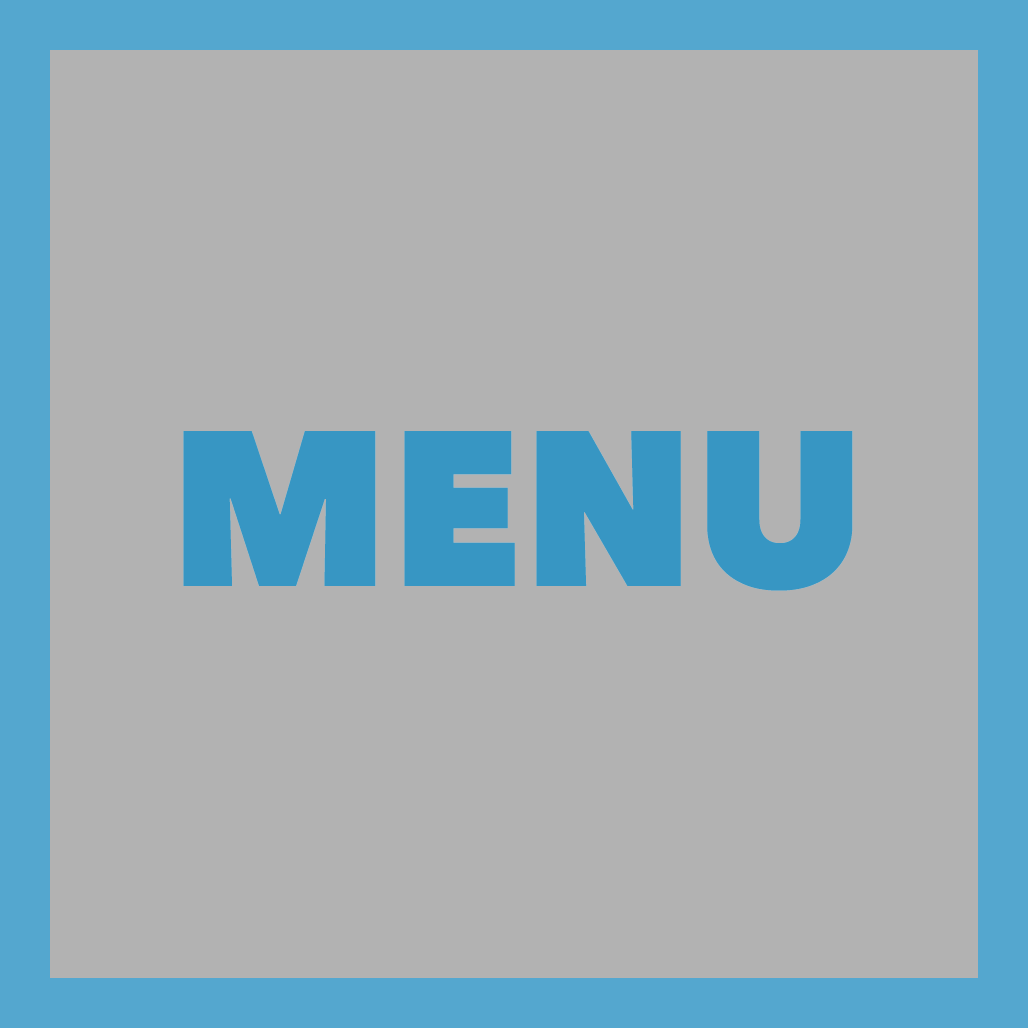
<style>
.page{position:relative;width:1028px;height:1028px;background:#b2b2b2}
.page>*{position:absolute;margin:0}
.t1{font:218.9px "AvenirNext-Heavy";color:#2a92c3}
</style>
<div class="page">
<p class="t1" style="left:183px;top:431px;width:670px;height:160px;opacity:0.9">MENU</p>
</div>
